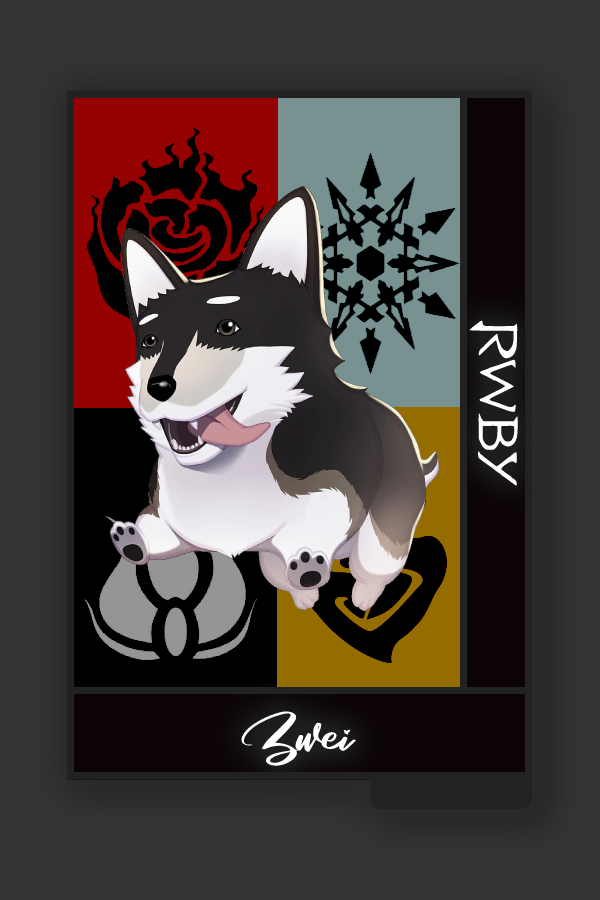
<style>
.page{position:relative;width:600px;height:900px;background:#333333}
.page>*{position:absolute;margin:0}
.t1{font:61.3px "RWBY_Style";color:#ffffff;scale:1.25 1}
.t2{font:76.6px "RosegaFREE";color:#ffffff;scale:0.91 1}
</style>
<div class="page">
<p class="t1" style="left:469px;top:320px;width:49px;height:166px;rotate:90deg">RWBY</p>
<p class="t2" style="left:239px;top:710px;width:117px;height:61px">Zwei</p>
</div>
